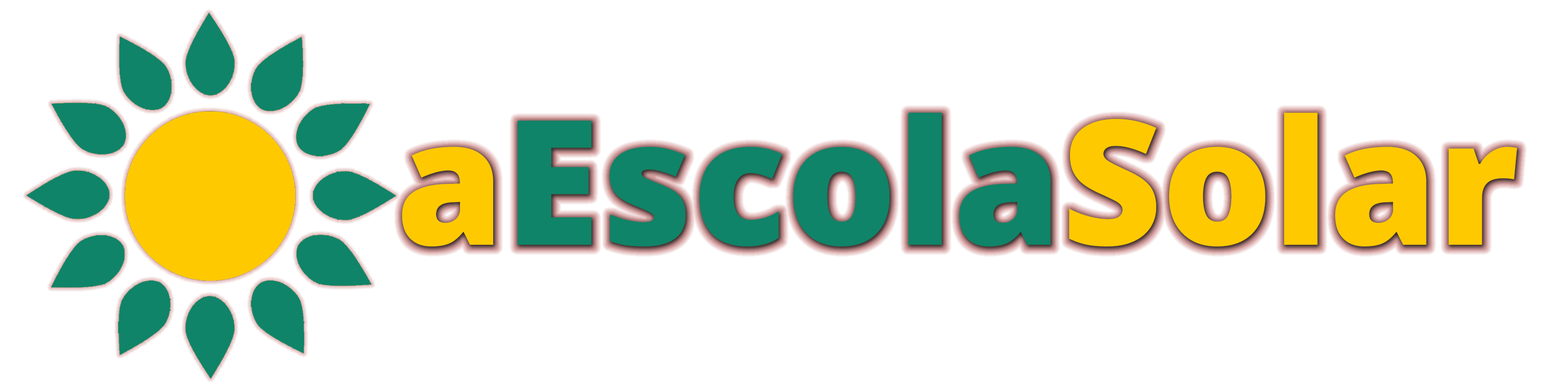
<style>
.page{position:relative;width:1568px;height:391px;background:#ffffff}
.page>*{position:absolute;margin:0}
.t1{font:173.9px "OpenSans-Extrabold";color:#0f8468}
.t2{font:173.9px "OpenSans-Extrabold";color:#ffc900}
</style>
<div class="page">
<p class="t1" style="left:402px;top:113px;width:1115px;height:134px"><span class="t2">a</span>Escola<span class="t2">Solar</span></p>
</div>
